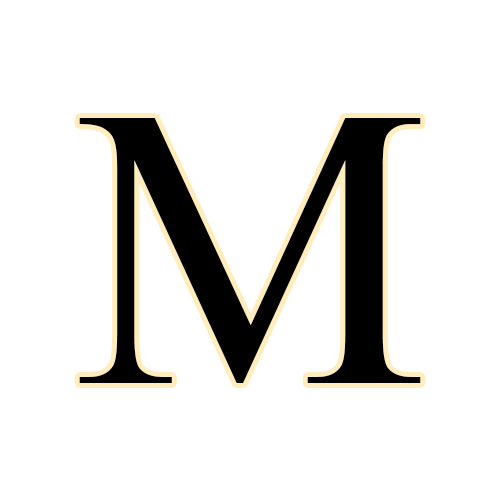
<style>
.page{position:relative;width:500px;height:500px;background:#ffffff}
.page>*{position:absolute;margin:0}
.t1{font:400px "TimesNewRomanPSMT";color:#000000}
</style>
<div class="page">
<p class="t1" style="left:79px;top:118px;width:342px;height:265px">M</p>
</div>
